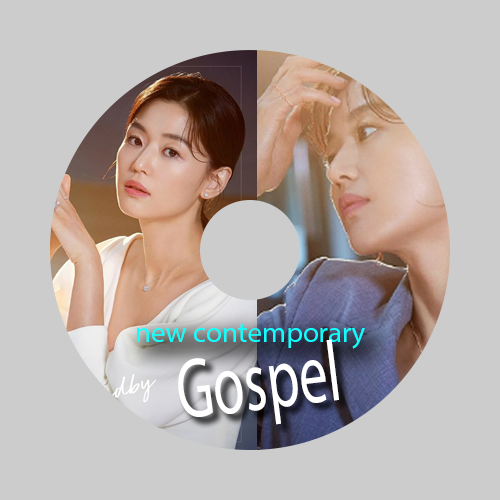
<style>
.page{position:relative;width:500px;height:500px;background:#cccccc}
.page>*{position:absolute;margin:0}
.t1{font:29px "MyriadPro-Regular";color:#0fffff}
.t2{font:85.6px "MyriadPro-Regular";color:#ffffff;scale:0.66 1}
</style>
<div class="page">
<p class="t1" style="left:137px;top:324px;width:228px;height:25px">new contemporary</p>
<p class="t2" style="left:178px;top:339px;width:161px;height:86px;rotate:-7deg">Gospel</p>
</div>
